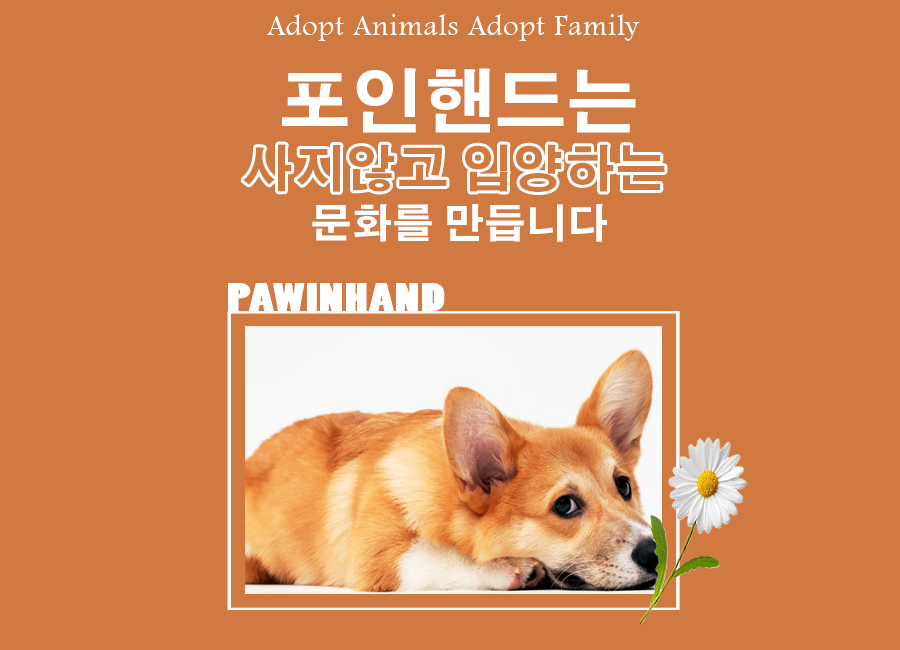
<style>
.page{position:relative;width:900px;height:650px;background:#d07940}
.page>*{position:absolute;margin:0}
.t1{font:30px "FootlightMTLight";letter-spacing:0.03em;color:#ffffff}
.t2{font:40px/55px "AdobeGothicStd-Bold";letter-spacing:0.03em;color:#ffffff}
.t3{font:70px/55px "AdobeGothicStd-Bold";letter-spacing:0.03em;color:#ffffff}
.t4{font:50px "AdobeGothicStd-Bold";letter-spacing:0.03em;color:#d07940}
.t5{font:36.6px "PoplarStd";letter-spacing:0.03em;color:#ffffff;scale:1.38 1}
</style>
<div class="page">
<p class="t1" style="left:267px;top:14px;width:373px;height:27px">Adopt Animals Adopt Family</p>
<p class="t2" style="left:282px;top:68px;width:354px;height:174px;text-align:center"><span class="t3">포인핸드는<br><br></span>문화를 만듭니다</p>
<p class="t4" style="left:243px;top:144px;width:422px;height:48px">사지않고 입양하는</p>
<p class="t5" style="left:228px;top:283px;width:217px;height:28px">PAWINHAND</p>
</div>
